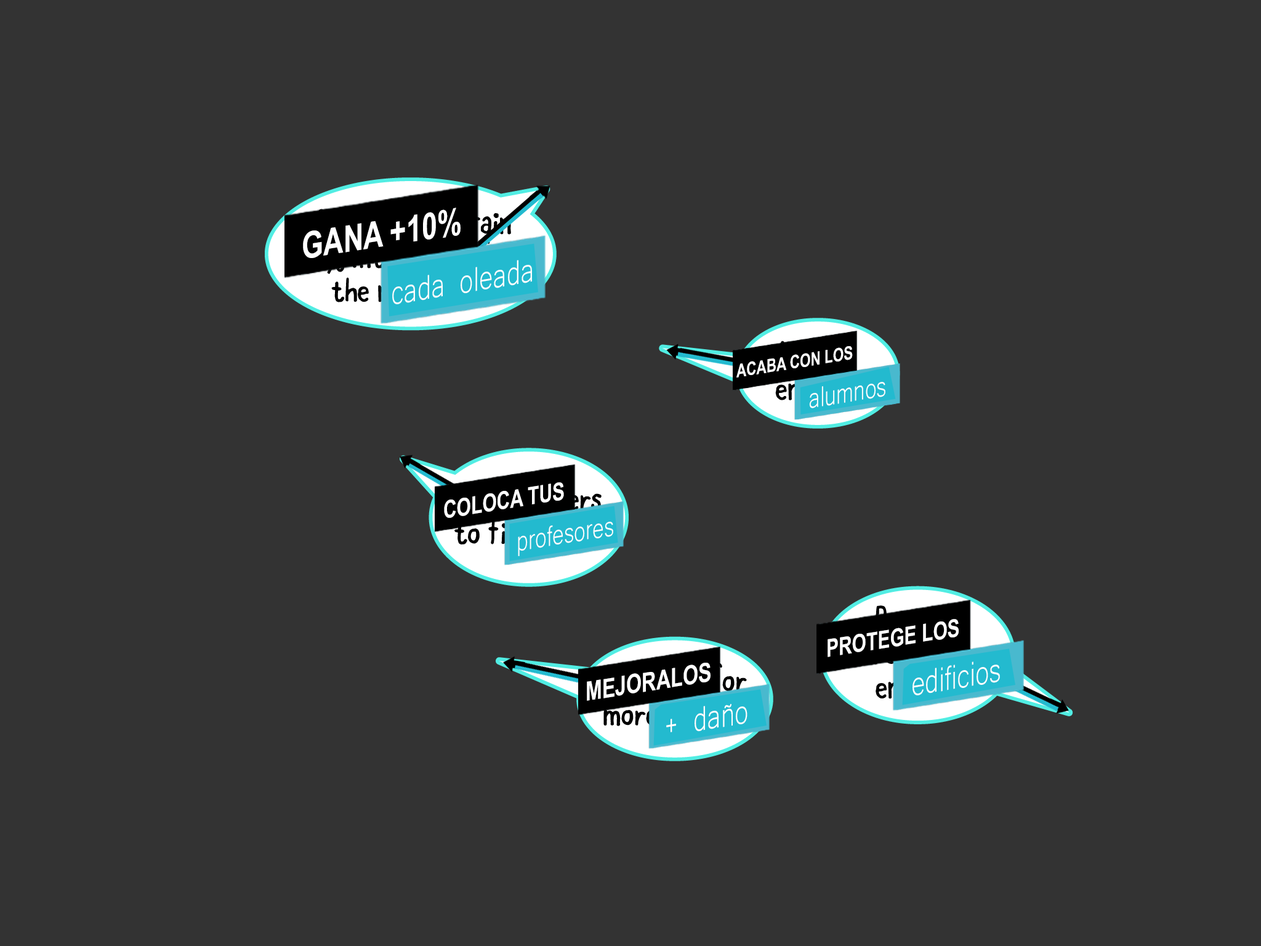
<style>
.page{position:relative;width:1261px;height:946px;background:#333333}
.page>*{position:absolute;margin:0}
.t1{font:36.9px "Arial-BoldMT";color:#ffffff;scale:0.76 1}
.t2{font:44.3px "Microsoft-Yi-Baiti";color:#ffffff;scale:0.76 1}
.t3{font:18.5px "Arial-BoldMT";color:#ffffff;scale:0.76 1}
.t4{font:36.9px "Microsoft-Yi-Baiti";color:#ffffff;scale:0.76 1}
.t5{font:24.6px "Arial-BoldMT";color:#ffffff;scale:0.76 1}
.t6{font:26.5px "Arial-BoldMT";color:#ffffff;scale:0.76 1}
</style>
<div class="page">
<p class="t1" style="left:303px;top:207px;width:158px;height:51px;rotate:-9deg">GANA +10%</p>
<p class="t2" style="left:392px;top:260px;width:140px;height:44px;rotate:-9deg">cada oleada</p>
<p class="t3" style="left:736px;top:346px;width:117px;height:31px;rotate:-9deg">ACABA CON LOS</p>
<p class="t4" style="left:809px;top:382px;width:76px;height:26px;rotate:-9deg">alumnos</p>
<p class="t5" style="left:444px;top:482px;width:120px;height:36px;rotate:-9deg">COLOCA TUS</p>
<p class="t4" style="left:518px;top:521px;width:95px;height:35px;rotate:-9deg">profesores</p>
<p class="t5" style="left:827px;top:619px;width:132px;height:38px;rotate:-9deg">PROTEGE LOS</p>
<p class="t6" style="left:587px;top:662px;width:123px;height:39px;rotate:-9deg">MEJORALOS</p>
<p class="t2" style="left:912px;top:661px;width:88px;height:34px;rotate:-9deg">edificios</p>
<p class="t2" style="left:666px;top:704px;width:81px;height:28px;rotate:-9deg">+ daño</p>
</div>
